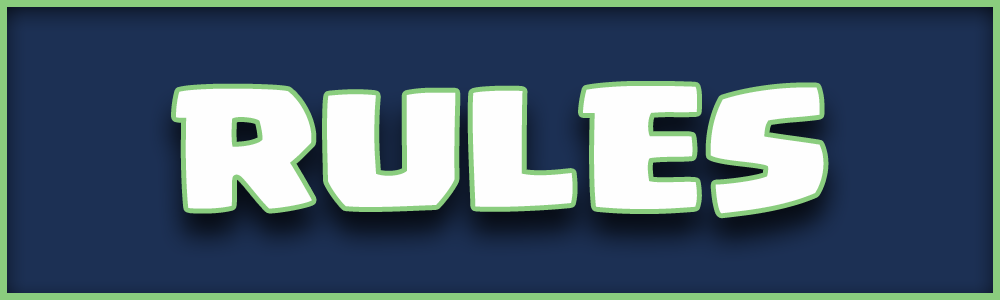
<style>
.page{position:relative;width:1000px;height:300px;background:#1c3054}
.page>*{position:absolute;margin:0}
.t1{font:125px "Supercell-Magic";color:#fefefe;scale:1.2 1}
</style>
<div class="page">
<p class="t1" style="left:176px;top:86px;width:648px;height:128px">RULES</p>
</div>
